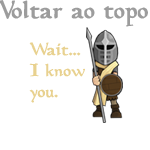
<style>
.page{position:relative;width:150px;height:150px;background:#ffffff}
.page>*{position:absolute;margin:0}
.t1{font:25px "Planewalker-Bold";color:#9c9c9c}
.t2{font:17.8px "Planewalker-Bold";color:#e8d18f}
</style>
<div class="page">
<p class="t1" style="left:0px;top:0px;width:148px;height:27px">Voltar ao topo</p>
<p class="t2" style="left:29px;top:42px;width:56px;height:61px">Wait...<br>I know<br>you.</p>
</div>
